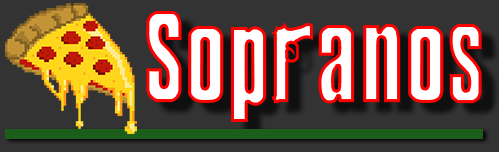
<style>
.page{position:relative;width:499px;height:152px;background:#333333}
.page>*{position:absolute;margin:0}
.t1{font:125px "Mobsters"}
</style>
<div class="page">
<p class="t1" style="left:4px;top:11px;width:478px;height:111px">Sopranos</p>
</div>
